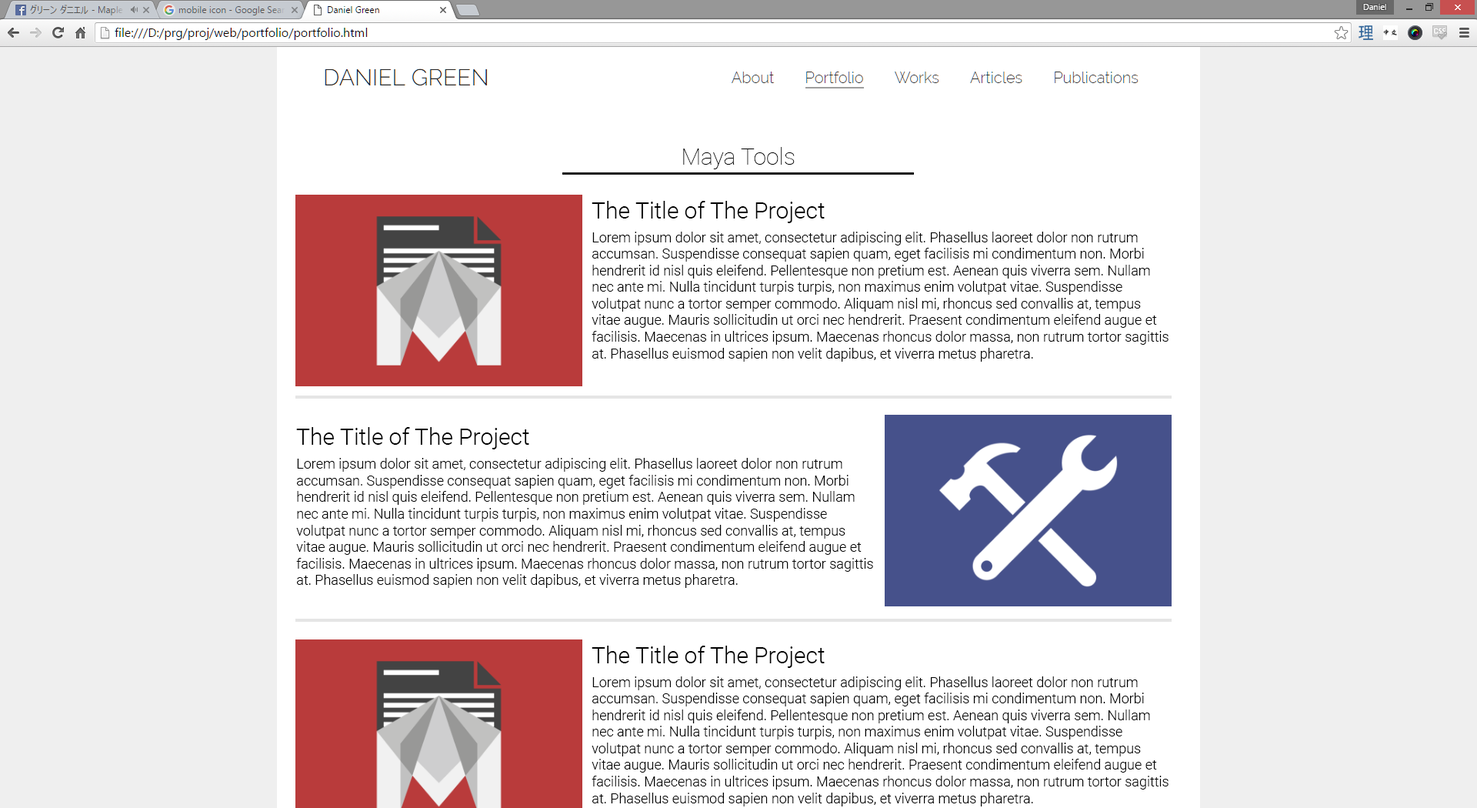
<style>
.page{position:relative;width:1477px;height:808px;background:#ffffff}
.page>*{position:absolute;margin:0}
.t1{font:23.1px "Roboto-Thin";color:#000000}
.t2{font:23.1px "Roboto-Light";color:#000000}
.t3{font:13.8px "Roboto-Light";color:#000000}
</style>
<div class="page">
<p class="t1" style="left:683px;top:147px;width:111px;height:22px">Maya Tools</p>
<p class="t2" style="left:591px;top:201px;width:233px;height:22px">The Title of The Project</p>
<p class="t3" style="left:591px;top:231px;width:577px;height:130px">Lorem ipsum dolor sit amet, consectetur adipiscing elit. Phasellus laoreet dolor non rutrum accumsan. Suspendisse consequat sapien quam, eget facilisis mi condimentum non. Morbi hendrerit id nisl quis eleifend. Pellentesque non pretium est. Aenean quis viverra sem. Nullam nec ante mi. Nulla tincidunt turpis turpis, non maximus enim volutpat vitae. Suspendisse volutpat nunc a tortor semper commodo. Aliquam nisl mi, rhoncus sed convallis at, tempus vitae augue. Mauris sollicitudin ut orci nec hendrerit. Praesent condimentum eleifend augue et facilisis. Maecenas in ultrices ipsum. Maecenas rhoncus dolor massa, non rutrum tortor sagittis at. Phasellus euismod sapien non velit dapibus, et viverra metus pharetra.</p>
<p class="t2" style="left:296px;top:427px;width:233px;height:22px">The Title of The Project</p>
<p class="t3" style="left:296px;top:458px;width:577px;height:130px">Lorem ipsum dolor sit amet, consectetur adipiscing elit. Phasellus laoreet dolor non rutrum accumsan. Suspendisse consequat sapien quam, eget facilisis mi condimentum non. Morbi hendrerit id nisl quis eleifend. Pellentesque non pretium est. Aenean quis viverra sem. Nullam nec ante mi. Nulla tincidunt turpis turpis, non maximus enim volutpat vitae. Suspendisse volutpat nunc a tortor semper commodo. Aliquam nisl mi, rhoncus sed convallis at, tempus vitae augue. Mauris sollicitudin ut orci nec hendrerit. Praesent condimentum eleifend augue et facilisis. Maecenas in ultrices ipsum. Maecenas rhoncus dolor massa, non rutrum tortor sagittis at. Phasellus euismod sapien non velit dapibus, et viverra metus pharetra.</p>
<p class="t2" style="left:591px;top:645px;width:233px;height:23px">The Title of The Project</p>
<p class="t3" style="left:591px;top:676px;width:577px;height:130px">Lorem ipsum dolor sit amet, consectetur adipiscing elit. Phasellus laoreet dolor non rutrum accumsan. Suspendisse consequat sapien quam, eget facilisis mi condimentum non. Morbi hendrerit id nisl quis eleifend. Pellentesque non pretium est. Aenean quis viverra sem. Nullam nec ante mi. Nulla tincidunt turpis turpis, non maximus enim volutpat vitae. Suspendisse volutpat nunc a tortor semper commodo. Aliquam nisl mi, rhoncus sed convallis at, tempus vitae augue. Mauris sollicitudin ut orci nec hendrerit. Praesent condimentum eleifend augue et facilisis. Maecenas in ultrices ipsum. Maecenas rhoncus dolor massa, non rutrum tortor sagittis at. Phasellus euismod sapien non velit dapibus, et viverra metus pharetra.</p>
</div>
